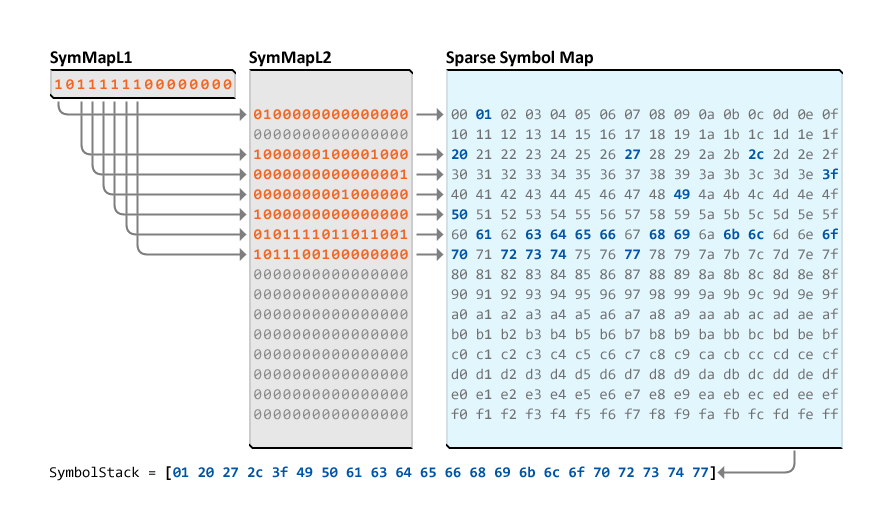
<style>
.page{position:relative;width:893px;height:531px;background:#ffffff}
.page>*{position:absolute;margin:0}
.t1{font:18px "Calibri-Bold";color:#000000}
.t2{font:15px "Consolas-Bold";letter-spacing:0.2em;color:#f26522}
.t3{font:15px/20px "Consolas";letter-spacing:0.1em;color:#898989}
.t4{font:15px/20px "Consolas-Bold";letter-spacing:0.1em;color:#f26522}
.t5{font:15px/20px "Consolas";color:#707070}
.t6{font:15px/20px "Consolas-Bold";color:#0054a6}
.t7{font:15px "Consolas-Bold";color:#0054a6}
.t8{font:15px "Consolas";color:#000000}
.t9{font:15px "Consolas-Bold";color:#000000}
</style>
<div class="page">
<p class="t1" style="left:50px;top:51px;width:82px;height:16px">SymMapL1</p>
<p class="t1" style="left:249px;top:51px;width:82px;height:16px">SymMapL2</p>
<p class="t1" style="left:446px;top:50px;width:147px;height:17px">Sparse Symbol Map</p>
<p class="t2" style="left:55px;top:79px;width:177px;height:11px">1011111100000000</p>
<p class="t3" style="left:254px;top:109px;width:154px;height:311px"><span class="t4">0100000000000000<br></span>0000000000000000<br><span class="t4">1000000100001000 <br>0000000000000001 <br>0000000001000000 <br>1000000000000000 <br>0101111011011001 <br>1011100100000000<br></span>0000000000000000<br>0000000000000000<br>0000000000000000<br>0000000000000000<br>0000000000000000<br>0000000000000000<br>0000000000000000<br>0000000000000000</p>
<p class="t5" style="left:451px;top:108px;width:387px;height:312px">00    02 03 04 05 06 07 08 09 0a 0b 0c 0d 0e 0f<br>10 11 12 13 14 15 16 17 18 19 1a 1b 1c 1d 1e 1f <br>   21 22 23 24 25 26    28 29 2a 2b    2d 2e 2f <br>30 31 32 33 34 35 36 37 38 39 3a 3b 3c 3d 3e    <br>40 41 42 43 44 45 46 47 48    4a 4b 4c 4d 4e 4f <br>   51 52 53 54 55 56 57 58 59 5a 5b 5c 5d 5e 5f <br>60    62             67       6a       6d 6e    <br>   71          75 76    78 79 7a 7b 7c 7d 7e 7f <br>80 81 82 83 84 85 86 87 88 89 8a 8b 8c 8d 8e 8f <br>90 91 92 93 94 95 96 97 98 99 9a 9b 9c 9d 9e 9f <br>a0 a1 a2 a3 a4 a5 a6 a7 a8 a9 aa ab ac ad ae af <br>b0 b1 b2 b3 b4 b5 b6 b7 b8 b9 ba bb bc bd be bf <br>c0 c1 c2 c3 c4 c5 c6 c7 c8 c9 ca cb cc cd ce cf <br>d0 d1 d2 d3 d4 d5 d6 d7 d8 d9 da db dc dd de df <br>e0 e1 e2 e3 e4 e5 e6 e7 e8 e9 ea eb ec ed ee ef <br>f0 f1 f2 f3 f4 f5 f6 f7 f8 f9 fa fb fc fd fe ff</p>
<p class="t6" style="left:451px;top:109px;width:387px;height:151px">01<br><br>20                   27             2c<br>                                             3f<br>                           49<br>50 <br>   61    63 64 65 66    68 69    6b 6c       6f<br>70    72 73 74       77</p>
<p class="t7" style="left:50px;top:466px;width:665px;height:15px"><span class="t8">SymbolStack = </span><span class="t9">[</span>01 20 27 2c 3f 49 50 61 63 64 65 66 68 69 6b 6c 6f 70 72 73 74 77<span class="t9">]</span></p>
</div>
